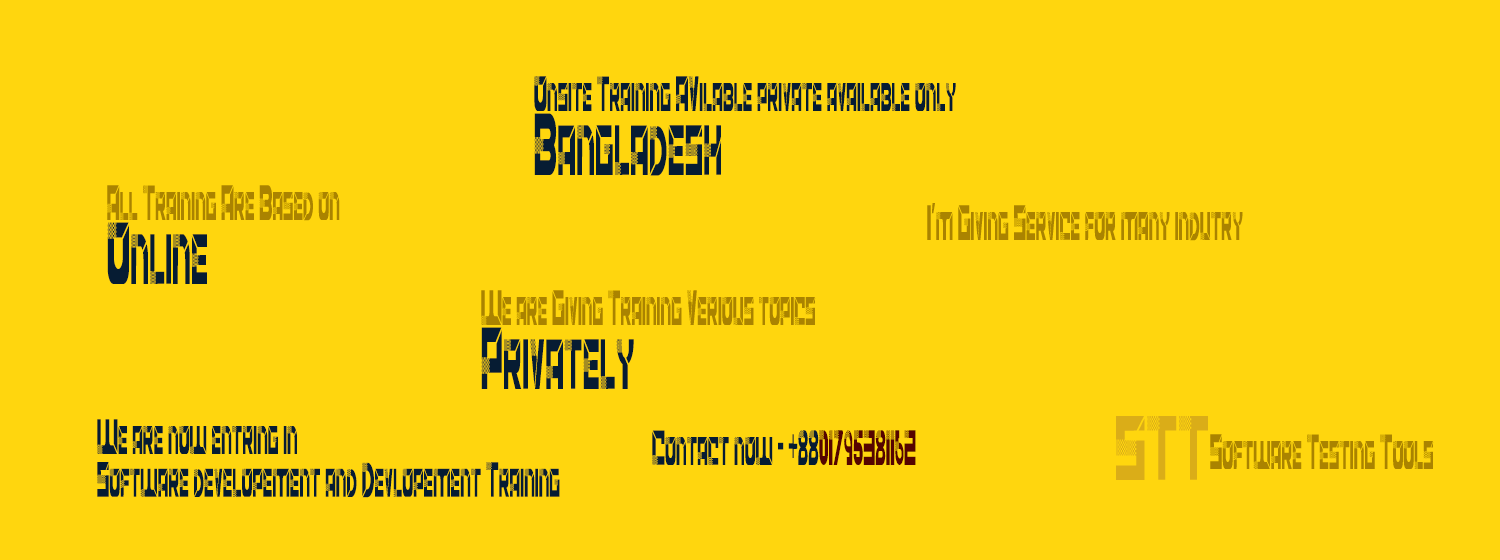
<style>
.page{position:relative;width:1500px;height:560px;background:#ffd60e}
.page>*{position:absolute;margin:0}
.t1{font:45.3px/21.3px "ACCELERARERegular";letter-spacing:0.025em;color:#061c33;scale:0.37 1}
.t2{font:80.3px/21.3px "ACCELERARERegular";letter-spacing:0.025em;color:#061c33;scale:0.37 1}
.t3{font:45.3px/21.3px "ACCELERARERegular";letter-spacing:0.025em;color:#aa8300;scale:0.37 1}
.t4{font:45.3px "ACCELERARERegular";letter-spacing:0.025em;color:#aa8300;scale:0.37 1}
.t5{font:83.7px "ACCELERARERegular";letter-spacing:0.025em;color:#daad18;scale:0.5 1}
.t6{font:45.3px "ACCELERARERegular";letter-spacing:0.025em;color:#061c33;scale:0.37 1}
.t7{font:45.3px "ACCELERARERegular";letter-spacing:0.025em;color:#560400;scale:0.37 1}
</style>
<div class="page">
<p class="t1" style="left:534px;top:76px;width:422px;height:100px">Onsite Training AVilable private available only <br><br><br><span class="t2">Bangladesh</span></p>
<p class="t3" style="left:107px;top:185px;width:233px;height:99px">All Training Are Based on <br><br><br><span class="t2">Online</span></p>
<p class="t4" style="left:927px;top:203px;width:316px;height:38px">I’m Giving Service for many indutry</p>
<p class="t3" style="left:481px;top:290px;width:335px;height:99px">We are Giving Training Verious topics <br><br><br><span class="t2">Privately</span></p>
<p class="t1" style="left:97px;top:419px;width:463px;height:79px">We are now entring in <br><br>Software developement and Devlopement Training</p>
<p class="t5" style="left:1116px;top:416px;width:92px;height:64px">STT</p>
<p class="t6" style="left:652px;top:430px;width:264px;height:35px">Contact now - +88<span class="t7">01795381162</span></p>
<p class="t4" style="left:1210px;top:434px;width:224px;height:35px">Software Testing Tools</p>
</div>
